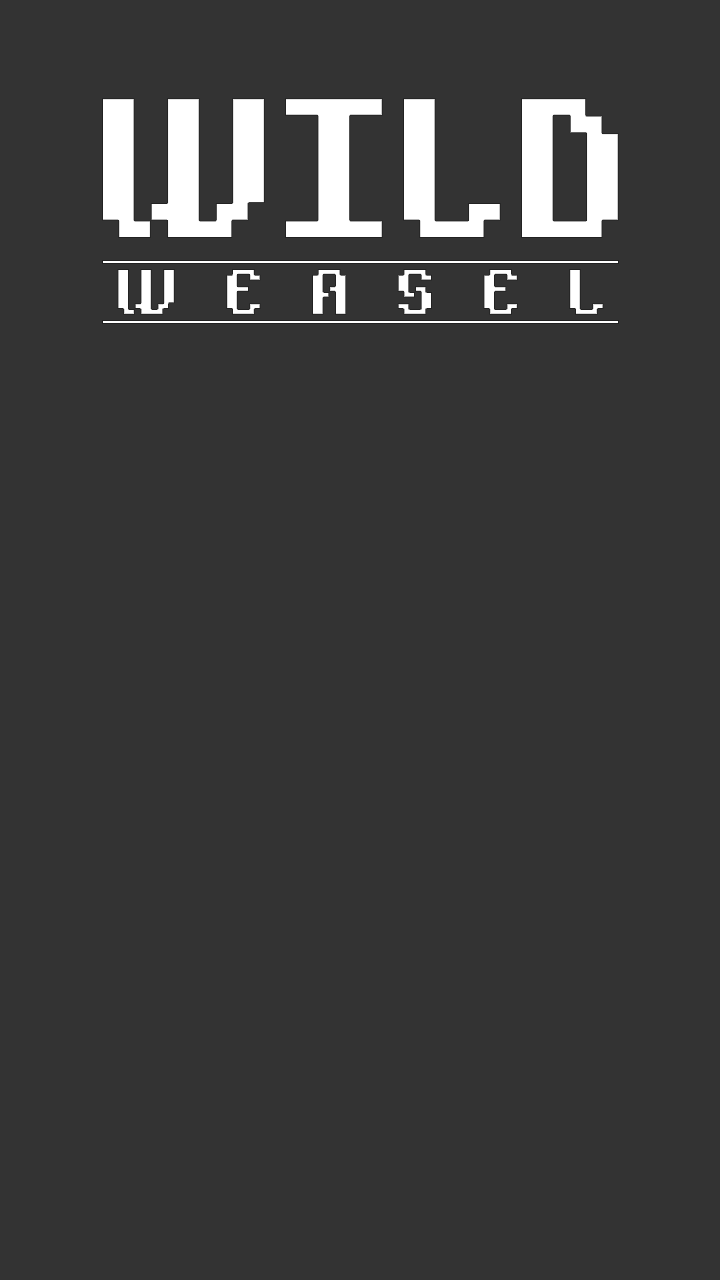
<style>
.page{position:relative;width:720px;height:1280px;background:#333333}
.page>*{position:absolute;margin:0}
.t1{font:232.9px "AlphaBetaBRK";letter-spacing:0.02em;color:#ffffff;scale:0.93 1}
.t2{font:76.2px "AlphaBetaBRK";letter-spacing:0.6em;color:#ffffff}
</style>
<div class="page">
<p class="t1" style="left:102px;top:98px;width:517px;height:140px">WILD</p>
<p class="t2" style="left:117px;top:269px;width:487px;height:46px">WEASEL</p>
</div>
